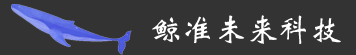
<style>
.page{position:relative;width:356px;height:55px;background:#333333}
.page>*{position:absolute;margin:0}
.t1{font:32px "STXinwei";color:#ffffff}
</style>
<div class="page">
<p class="t1" style="left:152px;top:15px;width:189px;height:29px">鲸准未来科技</p>
</div>
